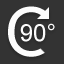
<style>
.page{position:relative;width:64px;height:64px;background:#333333}
.page>*{position:absolute;margin:0}
.t1{font:68px "ArialMT";color:#fcfcfc}
.t2{font:24.1px "ArialMT";color:#fcfcfc}
</style>
<div class="page">
<p class="t1" style="left:8px;top:6px;width:47px;height:51px">O</p>
<p class="t2" style="left:20px;top:23px;width:35px;height:19px">90°</p>
</div>
